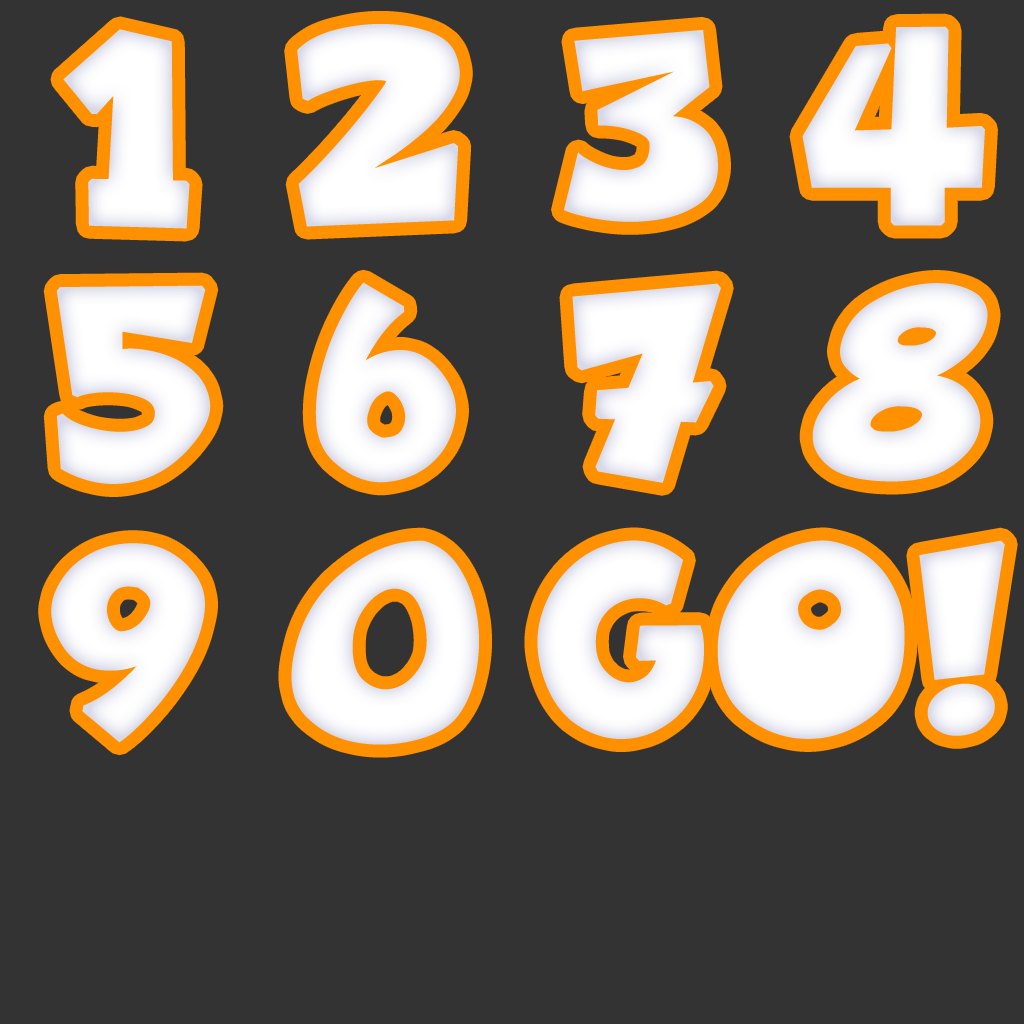
<style>
.page{position:relative;width:1024px;height:1024px;background:#333333}
.page>*{position:absolute;margin:0}
.t1{font:250px "Freakomix-Regular";color:#ffffff;font-weight:bold;scale:0.93 1}
</style>
<div class="page">
<p class="t1" style="left:63px;top:29px;width:127px;height:200px">1</p>
<p class="t1" style="left:297px;top:24px;width:163px;height:203px">2</p>
<p class="t1" style="left:564px;top:30px;width:154px;height:192px">3</p>
<p class="t1" style="left:802px;top:26px;width:183px;height:200px">4</p>
<p class="t1" style="left:56px;top:285px;width:155px;height:199px">5</p>
<p class="t1" style="left:315px;top:282px;width:141px;height:201px">6</p>
<p class="t1" style="left:572px;top:283px;width:149px;height:200px">7</p>
<p class="t1" style="left:812px;top:283px;width:176px;height:199px">8</p>
<p class="t1" style="left:51px;top:543px;width:154px;height:200px">9</p>
<p class="t1" style="left:291px;top:540px;width:188px;height:205px">0</p>
<p class="t1" style="left:537px;top:540px;width:468px;height:199px">GO!</p>
</div>
